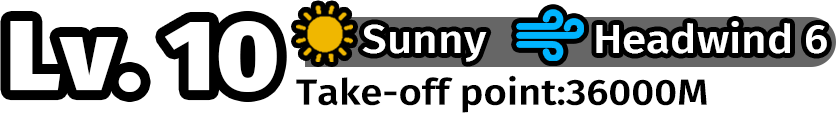
<style>
.page{position:relative;width:836px;height:116px;background:#ffffff}
.page>*{position:absolute;margin:0}
.t1{font:99px "FiraSans-Black";color:#ffffff;scale:1.07 1}
.t2{font:39.6px "FiraSans-Medium";color:#ffffff;scale:1.11 1}
.t3{font:36px "FiraSans-Medium";color:#000000;scale:1.11 1}
</style>
<div class="page">
<p class="t1" style="left:10px;top:21px;width:267px;height:71px">Lv. 10</p>
<p class="t2" style="left:362px;top:24px;width:125px;height:38px">Sunny</p>
<p class="t2" style="left:596px;top:21px;width:231px;height:33px">Headwind 6</p>
<p class="t3" style="left:296px;top:75px;width:411px;height:38px">Take-off point:36000M</p>
</div>
